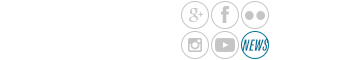
<style>
.page{position:relative;width:360px;height:60px;background:#ffffff}
.page>*{position:absolute;margin:0}
.t1{font:16px "AkzidenzGrotConBQ-MediumItalic";color:#00749a;text-transform:uppercase}
</style>
<div class="page">
<p class="t1" style="left:242px;top:39px;width:27px;height:12px">news</p>
</div>
